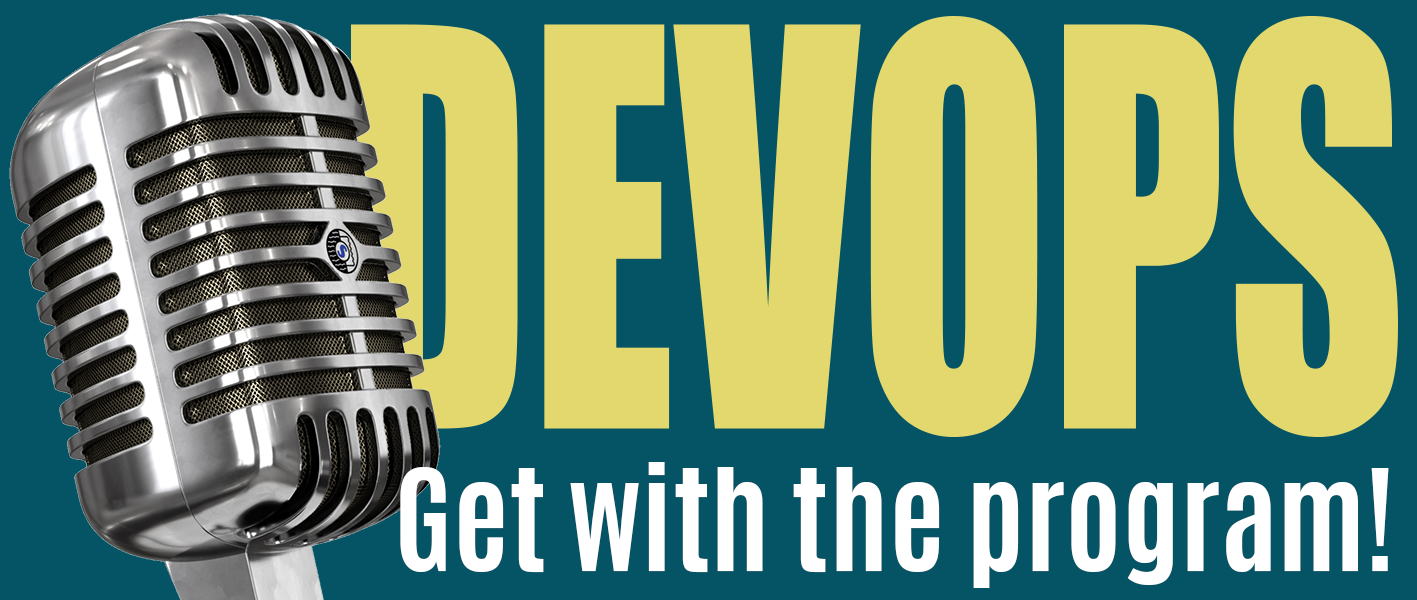
<style>
.page{position:relative;width:1417px;height:600px;background:#045465}
.page>*{position:absolute;margin:0}
.t1{font:120px "Antonio-Bold";color:#ffffff}
</style>
<div class="page">
<p class="t1" style="left:400px;top:462px;width:989px;height:126px">Get with the program!</p>
</div>
